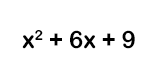
<style>
.page{position:relative;width:160px;height:75px;background:#ffffff}
.page>*{position:absolute;margin:0}
.t1{font:24px "ArialRoundedMTBold";color:#000000}
</style>
<div class="page">
<p class="t1" style="left:22px;top:30px;width:113px;height:19px">x2 + 6x + 9</p>
</div>
